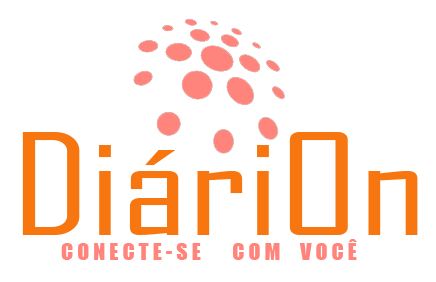
<style>
.page{position:relative;width:436px;height:282px;background:#ffffff}
.page>*{position:absolute;margin:0}
.t1{font:135.3px "AgencyFB-Reg";color:#f7760f;scale:1.32 1}
.t2{font:22.2px "Impact";color:#ff847c}
</style>
<div class="page">
<p class="t1" style="left:22px;top:132px;width:396px;height:103px">DiáriOn</p>
<p class="t2" style="left:61px;top:239px;width:296px;height:21px">C O N E C T E - S E        C O M     V O C Ê</p>
</div>
